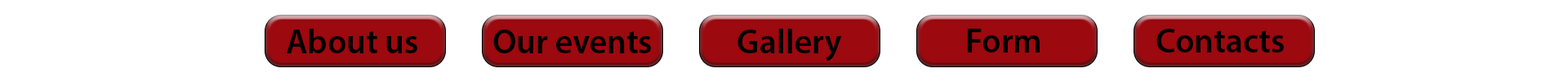
<style>
.page{position:relative;width:1568px;height:82px;background:#ffffff}
.page>*{position:absolute;margin:0}
.t1{font:34px "MyriadPro-Semibold";color:#030000}
</style>
<div class="page">
<p class="t1" style="left:287px;top:29px;width:130px;height:24px">About us</p>
<p class="t1" style="left:493px;top:29px;width:158px;height:24px">Our events</p>
<p class="t1" style="left:737px;top:29px;width:105px;height:32px">Gallery</p>
<p class="t1" style="left:968px;top:29px;width:72px;height:23px">Form</p>
<p class="t1" style="left:1156px;top:29px;width:128px;height:23px">Contacts</p>
</div>
